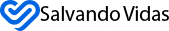
<style>
.page{position:relative;width:169px;height:31px;background:#ffffff}
.page>*{position:absolute;margin:0}
.t1{font:21px "MyriadPro-Regular";color:#000000}
</style>
<div class="page">
<p class="t1" style="left:40px;top:6px;width:80px;height:15px">Salvando</p>
<p class="t1" style="left:123px;top:6px;width:46px;height:15px">Vidas</p>
</div>
